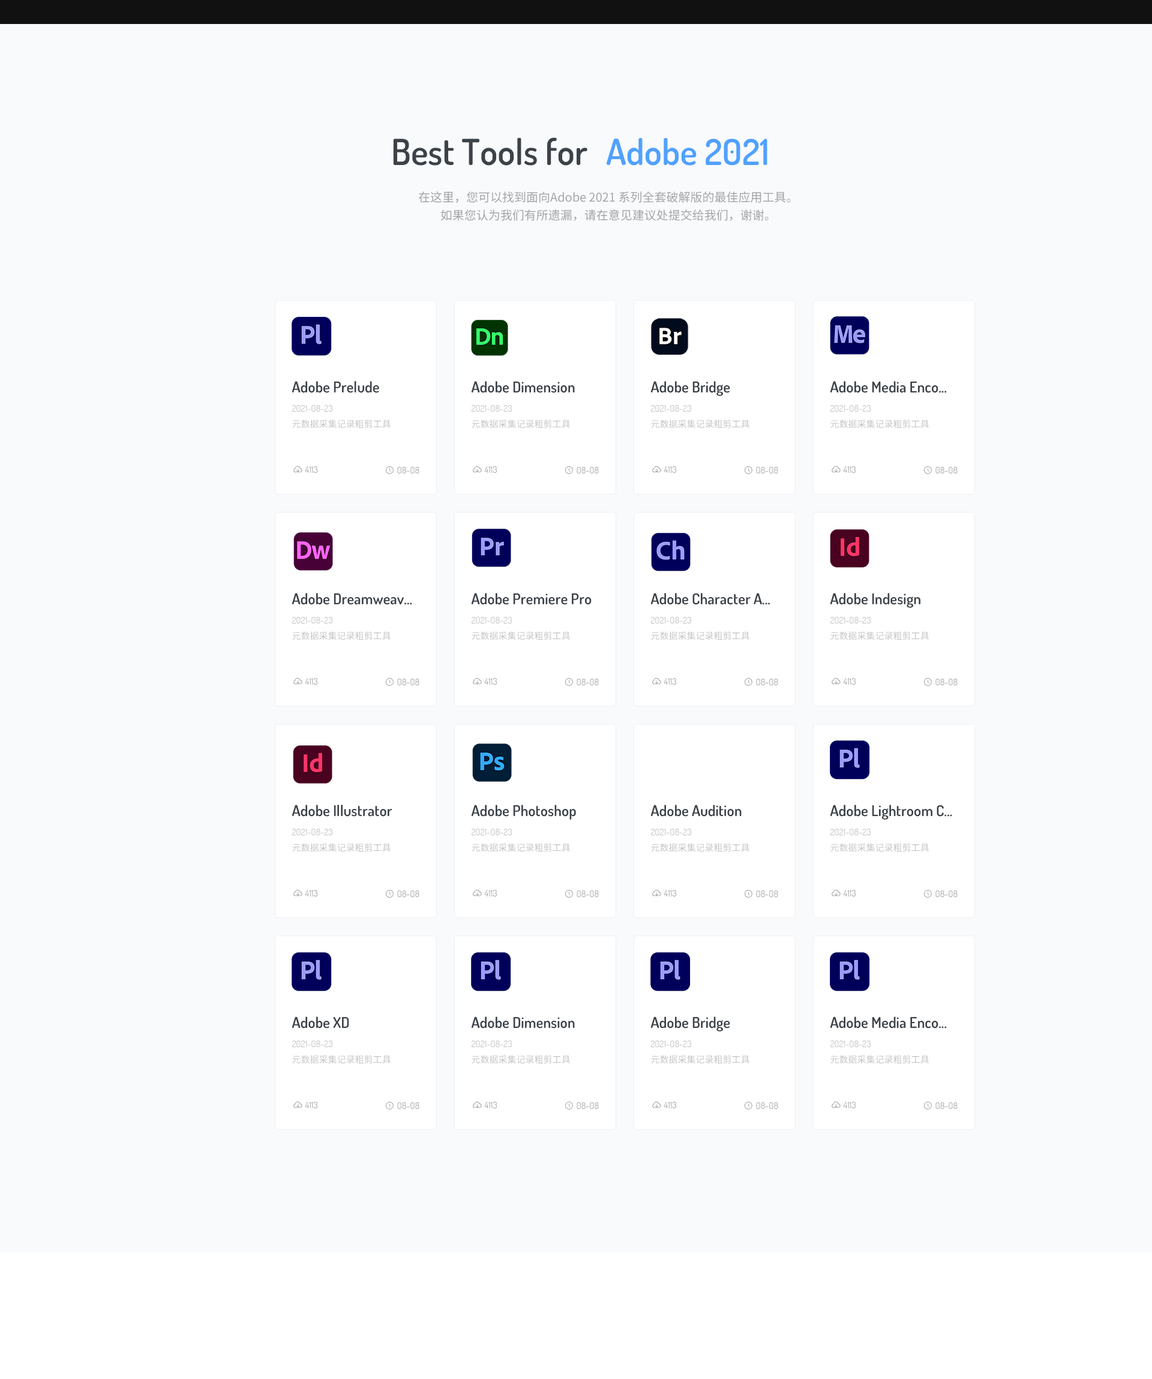
<style>
.page{position:relative;width:1152px;height:1379px;background:#f8fafc}
.page>*{position:absolute;margin:0}
.t1{font:36px "Dosis-SemiBold";color:#3c4248}
.t2{font:36px "Dosis-SemiBold";color:#50a1ff}
.t3{font:12px/18px "SourceHanSansCN-Regular";color:#a3a3a4}
.t4{font:15px "Dosis-SemiBold";color:#3c4248}
.t5{font:9px "Dosis-Regular";color:#c1c1c1}
.t6{font:9px "SourceHanSansCN-Regular";color:#c1c1c1}
.t7{font:9px "Dosis-Regular";color:#a5a5a5}
</style>
<div class="page">
<p class="t1" style="left:393px;top:137px;width:194px;height:29px">Best Tools for</p>
<p class="t2" style="left:606px;top:138px;width:161px;height:28px">Adobe 2021</p>
<p class="t3" style="left:419px;top:191px;width:372px;height:30px;text-align:center">在这里，您可以找到面向Adobe 2021 系列全套破解版的最佳应用工具。<br>如果您认为我们有所遗漏，请在意见建议处提交给我们，谢谢。</p>
<p class="t4" style="left:292px;top:381px;width:87px;height:12px">Adobe Prelude</p>
<p class="t4" style="left:471px;top:381px;width:104px;height:12px">Adobe Dimension</p>
<p class="t4" style="left:650px;top:381px;width:80px;height:15px">Adobe Bridge</p>
<p class="t4" style="left:830px;top:381px;width:117px;height:12px">Adobe Media Enco...</p>
<p class="t5" style="left:292px;top:405px;width:40px;height:7px">2021-08-23</p>
<p class="t5" style="left:472px;top:405px;width:40px;height:7px">2021-08-23</p>
<p class="t5" style="left:651px;top:405px;width:40px;height:7px">2021-08-23</p>
<p class="t5" style="left:830px;top:405px;width:41px;height:7px">2021-08-23</p>
<p class="t6" style="left:292px;top:419px;width:99px;height:9px">元数据采集记录粗剪工具</p>
<p class="t6" style="left:472px;top:419px;width:98px;height:9px">元数据采集记录粗剪工具</p>
<p class="t6" style="left:651px;top:419px;width:98px;height:9px">元数据采集记录粗剪工具</p>
<p class="t6" style="left:830px;top:419px;width:99px;height:9px">元数据采集记录粗剪工具</p>
<p class="t7" style="left:305px;top:466px;width:12px;height:7px">4113</p>
<p class="t7" style="left:397px;top:467px;width:22px;height:6px">08-08</p>
<p class="t7" style="left:484px;top:466px;width:13px;height:7px">4113</p>
<p class="t7" style="left:577px;top:467px;width:22px;height:6px">08-08</p>
<p class="t7" style="left:664px;top:466px;width:12px;height:7px">4113</p>
<p class="t7" style="left:756px;top:467px;width:22px;height:6px">08-08</p>
<p class="t7" style="left:843px;top:466px;width:13px;height:7px">4113</p>
<p class="t7" style="left:935px;top:467px;width:23px;height:6px">08-08</p>
<p class="t4" style="left:292px;top:593px;width:120px;height:12px">Adobe Dreamweav...</p>
<p class="t4" style="left:471px;top:593px;width:121px;height:12px">Adobe Premiere Pro</p>
<p class="t4" style="left:650px;top:593px;width:120px;height:12px">Adobe Character A...</p>
<p class="t4" style="left:830px;top:593px;width:90px;height:15px">Adobe Indesign</p>
<p class="t5" style="left:292px;top:617px;width:40px;height:6px">2021-08-23</p>
<p class="t5" style="left:472px;top:617px;width:40px;height:6px">2021-08-23</p>
<p class="t5" style="left:651px;top:617px;width:40px;height:6px">2021-08-23</p>
<p class="t5" style="left:830px;top:617px;width:41px;height:6px">2021-08-23</p>
<p class="t6" style="left:292px;top:631px;width:99px;height:9px">元数据采集记录粗剪工具</p>
<p class="t6" style="left:472px;top:631px;width:98px;height:9px">元数据采集记录粗剪工具</p>
<p class="t6" style="left:651px;top:631px;width:98px;height:9px">元数据采集记录粗剪工具</p>
<p class="t6" style="left:830px;top:631px;width:99px;height:9px">元数据采集记录粗剪工具</p>
<p class="t7" style="left:305px;top:678px;width:12px;height:7px">4113</p>
<p class="t7" style="left:484px;top:678px;width:13px;height:7px">4113</p>
<p class="t7" style="left:664px;top:678px;width:12px;height:7px">4113</p>
<p class="t7" style="left:843px;top:678px;width:13px;height:7px">4113</p>
<p class="t7" style="left:397px;top:679px;width:22px;height:6px">08-08</p>
<p class="t7" style="left:577px;top:679px;width:22px;height:6px">08-08</p>
<p class="t7" style="left:756px;top:679px;width:22px;height:6px">08-08</p>
<p class="t7" style="left:935px;top:679px;width:23px;height:6px">08-08</p>
<p class="t4" style="left:292px;top:805px;width:100px;height:12px">Adobe Illustrator</p>
<p class="t4" style="left:471px;top:805px;width:105px;height:15px">Adobe Photoshop</p>
<p class="t4" style="left:650px;top:805px;width:92px;height:12px">Adobe Audition</p>
<p class="t4" style="left:830px;top:805px;width:122px;height:15px">Adobe Lightroom C...</p>
<p class="t5" style="left:292px;top:829px;width:40px;height:6px">2021-08-23</p>
<p class="t5" style="left:472px;top:829px;width:40px;height:6px">2021-08-23</p>
<p class="t5" style="left:651px;top:829px;width:40px;height:6px">2021-08-23</p>
<p class="t5" style="left:830px;top:829px;width:41px;height:6px">2021-08-23</p>
<p class="t6" style="left:292px;top:843px;width:99px;height:9px">元数据采集记录粗剪工具</p>
<p class="t6" style="left:472px;top:843px;width:98px;height:9px">元数据采集记录粗剪工具</p>
<p class="t6" style="left:651px;top:843px;width:98px;height:9px">元数据采集记录粗剪工具</p>
<p class="t6" style="left:830px;top:843px;width:99px;height:9px">元数据采集记录粗剪工具</p>
<p class="t7" style="left:305px;top:890px;width:12px;height:6px">4113</p>
<p class="t7" style="left:397px;top:890px;width:22px;height:7px">08-08</p>
<p class="t7" style="left:484px;top:890px;width:13px;height:6px">4113</p>
<p class="t7" style="left:577px;top:890px;width:22px;height:7px">08-08</p>
<p class="t7" style="left:664px;top:890px;width:12px;height:6px">4113</p>
<p class="t7" style="left:756px;top:890px;width:22px;height:7px">08-08</p>
<p class="t7" style="left:843px;top:890px;width:13px;height:6px">4113</p>
<p class="t7" style="left:935px;top:890px;width:23px;height:7px">08-08</p>
<p class="t4" style="left:292px;top:1016px;width:57px;height:12px">Adobe XD</p>
<p class="t4" style="left:471px;top:1016px;width:104px;height:12px">Adobe Dimension</p>
<p class="t4" style="left:650px;top:1016px;width:80px;height:15px">Adobe Bridge</p>
<p class="t4" style="left:830px;top:1016px;width:117px;height:12px">Adobe Media Enco...</p>
<p class="t5" style="left:292px;top:1040px;width:40px;height:7px">2021-08-23</p>
<p class="t5" style="left:472px;top:1040px;width:40px;height:7px">2021-08-23</p>
<p class="t5" style="left:651px;top:1040px;width:40px;height:7px">2021-08-23</p>
<p class="t5" style="left:830px;top:1040px;width:41px;height:7px">2021-08-23</p>
<p class="t6" style="left:292px;top:1055px;width:99px;height:9px">元数据采集记录粗剪工具</p>
<p class="t6" style="left:472px;top:1055px;width:98px;height:9px">元数据采集记录粗剪工具</p>
<p class="t6" style="left:651px;top:1055px;width:98px;height:9px">元数据采集记录粗剪工具</p>
<p class="t6" style="left:830px;top:1055px;width:99px;height:9px">元数据采集记录粗剪工具</p>
<p class="t7" style="left:305px;top:1102px;width:12px;height:6px">4113</p>
<p class="t7" style="left:397px;top:1102px;width:22px;height:7px">08-08</p>
<p class="t7" style="left:484px;top:1102px;width:13px;height:6px">4113</p>
<p class="t7" style="left:577px;top:1102px;width:22px;height:7px">08-08</p>
<p class="t7" style="left:664px;top:1102px;width:12px;height:6px">4113</p>
<p class="t7" style="left:756px;top:1102px;width:22px;height:7px">08-08</p>
<p class="t7" style="left:843px;top:1102px;width:13px;height:6px">4113</p>
<p class="t7" style="left:935px;top:1102px;width:23px;height:7px">08-08</p>
</div>
